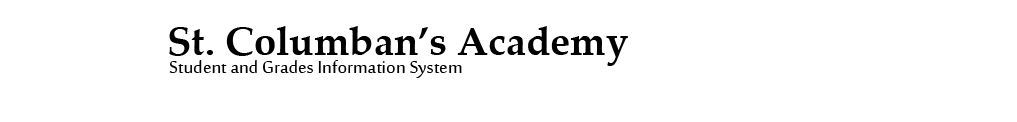
<style>
.page{position:relative;width:1017px;height:122px;background:#ffffff}
.page>*{position:absolute;margin:0}
.t1{font:40px "PalatinoLinotype-Bold";color:#000000}
.t2{font:24px "SakkalMajalla";color:#000000}
</style>
<div class="page">
<p class="t1" style="left:169px;top:26px;width:459px;height:40px">St. Columban’s Academy</p>
<p class="t2" style="left:169px;top:60px;width:293px;height:18px">Student and Grades Information System</p>
</div>
